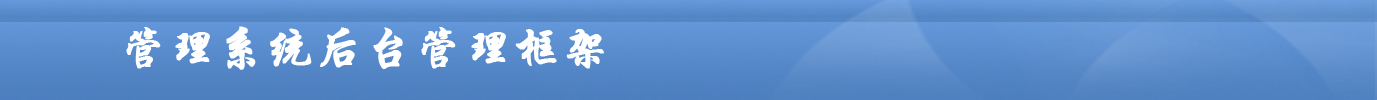
<style>
.page{position:relative;width:1377px;height:100px}
.page>*{position:absolute;margin:0}
.t1{font:48px "STXingkai";color:#ffffff;font-weight:bold}
</style>
<div class="page">
<p class="t1" style="left:126px;top:26px;width:478px;height:44px">管理系统后台管理框架</p>
</div>
